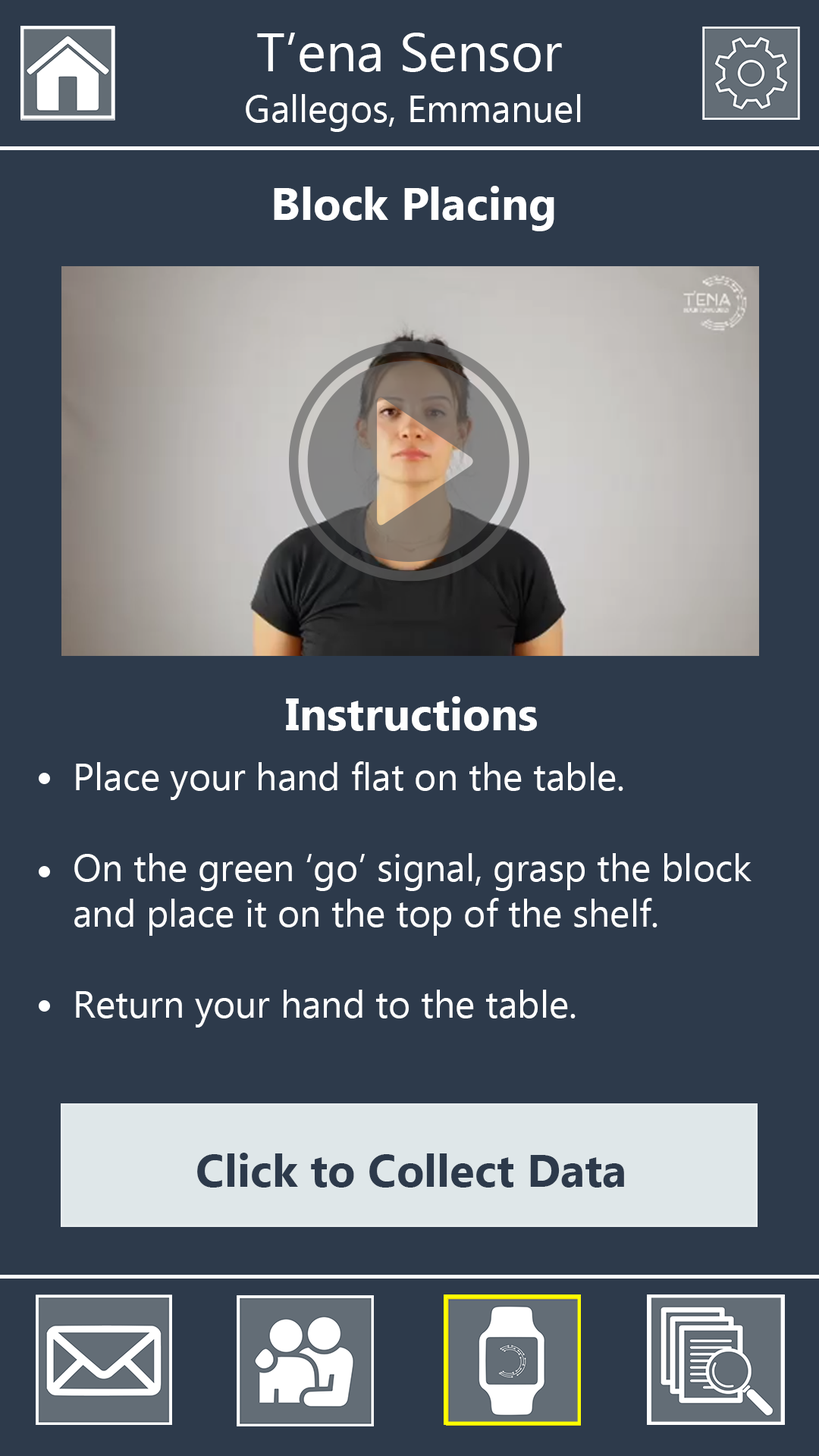
<style>
.page{position:relative;width:819px;height:1456px;background:#2d3a4b}
.page>*{position:absolute;margin:0}
.t1{font:54.6px "Ebrima";color:#ffffff}
.t2{font:37.9px "Ebrima";color:#ffffff}
.t3{font:45.5px "Ebrima-Bold";color:#ffffff}
.t4{font:45.5px "Ebrima-Bold";color:#fefefe}
.t5{font:37.9px "Ebrima";color:#fefefe}
.t6{font:45.5px "Ebrima-Bold";color:#2d3a4b}
</style>
<div class="page">
<p class="t1" style="left:257px;top:33px;width:305px;height:39px">T’ena Sensor</p>
<p class="t2" style="left:246px;top:94px;width:335px;height:38px">Gallegos, Emmanuel</p>
<p class="t3" style="left:274px;top:186px;width:280px;height:45px">Block Placing</p>
<p class="t4" style="left:286px;top:696px;width:251px;height:35px">Instructions</p>
<p class="t5" style="left:74px;top:761px;width:677px;height:267px">Place your hand flat on the table.<br><br>On the green ‘go’ signal, grasp the block and place it on the top of the shelf.<br><br>Return your hand to the table.</p>
<p class="t6" style="left:197px;top:1153px;width:427px;height:35px">Click to Collect Data</p>
</div>
